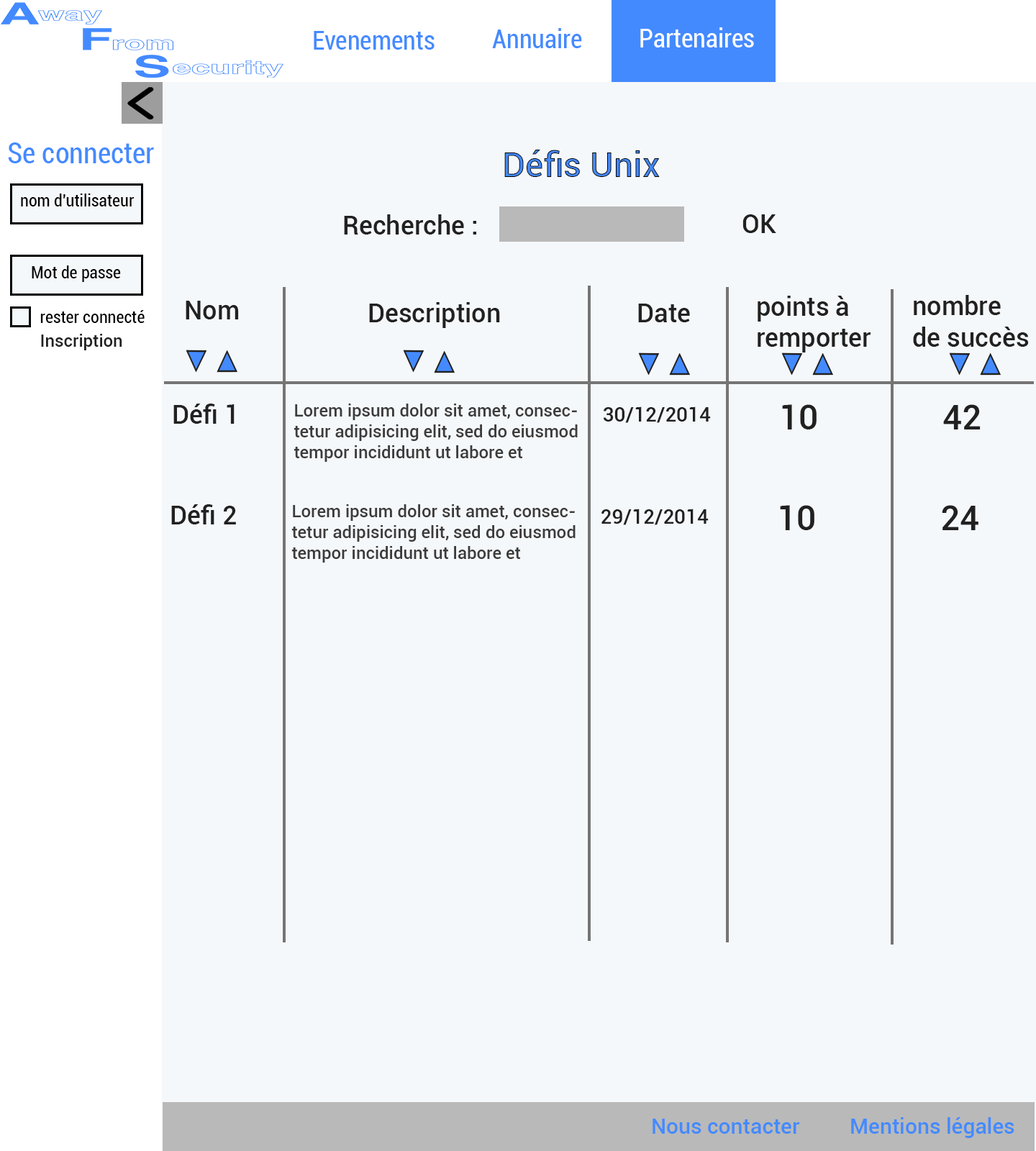
<style>
.page{position:relative;width:1036px;height:1151px;background:#f5f8fa}
.page>*{position:absolute;margin:0}
.t1{font:25.9px "Roboto-Condensed";color:#448aff}
.t2{font:25.9px "Roboto-Condensed";color:#ffffff}
.t3{font:28.8px "Roboto-Condensed";color:#448aff}
.t4{font:34.5px "Roboto-Medium"}
.t5{font:17.3px "Roboto-Condensed";color:#000000}
.t6{font:25.9px "Roboto-Medium";color:#212121}
.t7{font:17.3px "Roboto-Medium";color:#212121}
.t8{font:17.3px "Roboto-Medium";color:#3c3b3b}
.t9{font:20.1px "Roboto-Medium";color:#212121}
.t10{font:34.5px "Roboto-Medium";color:#212121}
.t11{font:21.6px "Roboto-Medium";color:#448aff}
</style>
<div class="page">
<p class="t1" style="left:492px;top:28px;width:90px;height:20px">Annuaire</p>
<p class="t2" style="left:640px;top:27px;width:114px;height:20px">Partenaires</p>
<p class="t1" style="left:314px;top:31px;width:121px;height:19px">Evenements</p>
<p class="t3" style="left:8px;top:142px;width:146px;height:21px">Se connecter</p>
<p class="t4" style="left:504px;top:150px;width:156px;height:27px">Défis Unix</p>
<p class="t5" style="left:21px;top:194px;width:113px;height:12px">nom d'utilisateur</p>
<p class="t6" style="left:344px;top:214px;width:132px;height:21px">Recherche :</p>
<p class="t6" style="left:742px;top:214px;width:34px;height:19px">OK</p>
<p class="t5" style="left:32px;top:265px;width:89px;height:17px">Mot de passe</p>
<p class="t6" style="left:186px;top:301px;width:53px;height:18px">Nom</p>
<p class="t6" style="left:369px;top:302px;width:131px;height:26px">Description</p>
<p class="t6" style="left:638px;top:304px;width:52px;height:18px">Date</p>
<p class="t6" style="left:758px;top:296px;width:113px;height:57px">points à<br>remporter</p>
<p class="t6" style="left:913px;top:295px;width:116px;height:52px">nombre <br>de succès</p>
<p class="t5" style="left:40px;top:310px;width:105px;height:13px">rester connecté</p>
<p class="t7" style="left:41px;top:334px;width:81px;height:16px">Inscription</p>
<p class="t6" style="left:173px;top:404px;width:62px;height:20px">Défi 1</p>
<p class="t8" style="left:294px;top:404px;width:284px;height:58px">Lorem ipsum dolor sit amet, consectetur adipisicing elit, sed do eiusmod tempor incididunt ut labore et</p>
<p class="t9" style="left:604px;top:406px;width:107px;height:17px">30/12/2014</p>
<p class="t10" style="left:782px;top:404px;width:35px;height:25px">10</p>
<p class="t10" style="left:943px;top:404px;width:38px;height:25px">42</p>
<p class="t6" style="left:171px;top:504px;width:65px;height:20px">Défi 2</p>
<p class="t8" style="left:291px;top:504px;width:285px;height:59px">Lorem ipsum dolor sit amet, consectetur adipisicing elit, sed do eiusmod tempor incididunt ut labore et</p>
<p class="t9" style="left:601px;top:509px;width:108px;height:16px">29/12/2014</p>
<p class="t10" style="left:780px;top:505px;width:34px;height:25px">10</p>
<p class="t10" style="left:942px;top:505px;width:36px;height:25px">24</p>
<p class="t11" style="left:653px;top:1119px;width:147px;height:15px">Nous contacter</p>
<p class="t11" style="left:851px;top:1117px;width:163px;height:21px">Mentions légales</p>
</div>
